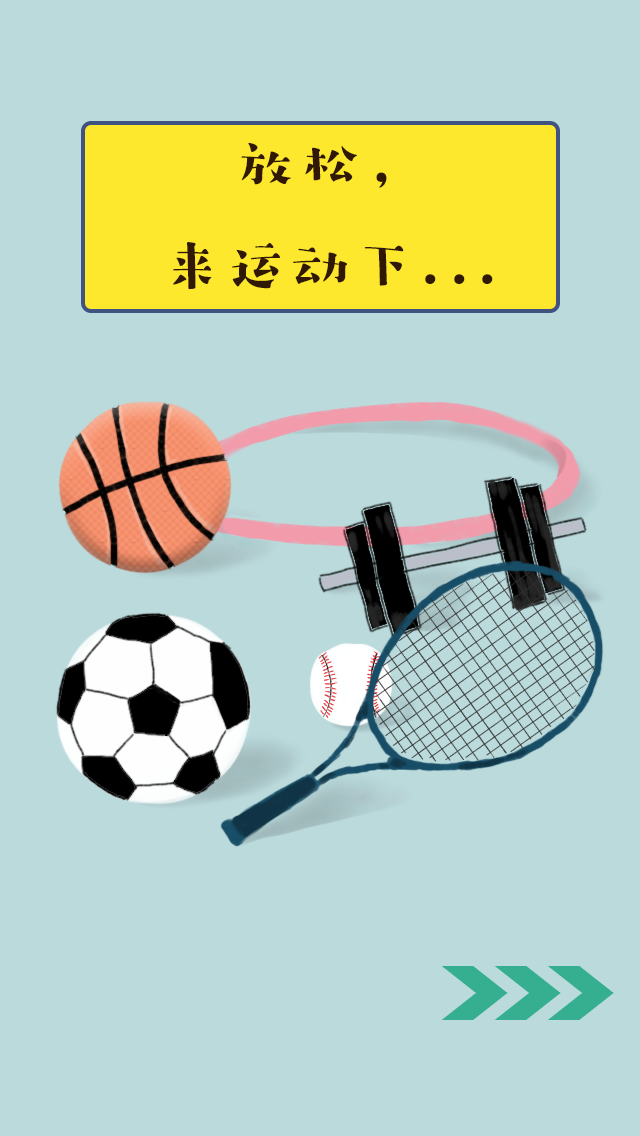
<style>
.page{position:relative;width:640px;height:1136px;background:#bbdadc}
.page>*{position:absolute;margin:0}
.t1{font:58.3px "HYZiYanHuanLeSongW";letter-spacing:0.1em;color:#301805}
</style>
<div class="page">
<p class="t1" style="left:173px;top:142px;width:320px;height:148px;text-align:center">放松，<br>来运动下...</p>
</div>
